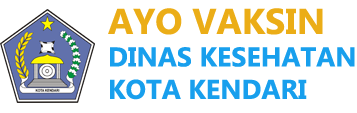
<style>
.page{position:relative;width:357px;height:113px;background:#ffffff}
.page>*{position:absolute;margin:0}
.t1{font:27px "Gadugi-Bold";color:#189fed}
.t2{font:36px "Gadugi-Bold";color:#ebad17}
</style>
<div class="page">
<p class="t1" style="left:108px;top:8px;width:247px;height:92px"><span class="t2">AYO VAKSIN<br></span>DINAS KESEHATAN<br>KOTA KENDARI</p>
</div>
